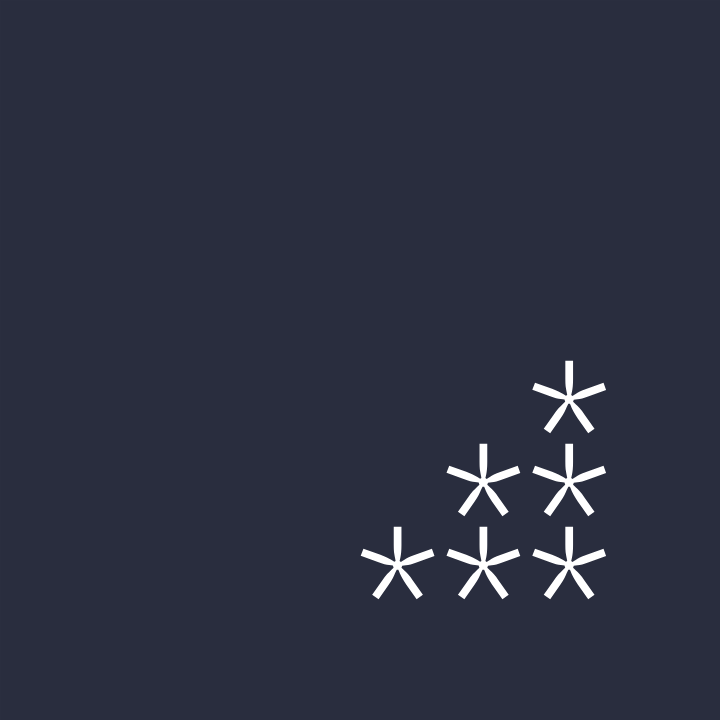
<style>
.page{position:relative;width:720px;height:720px;background:#292d3e}
.page>*{position:absolute;margin:0}
.t1{font:143px/83px "JetBrainsMono-Thin";color:#ffffff}
</style>
<div class="page">
<p class="t1" style="left:360px;top:360px;width:247px;height:240px;text-align:right">*<br>**<br>***</p>
</div>
